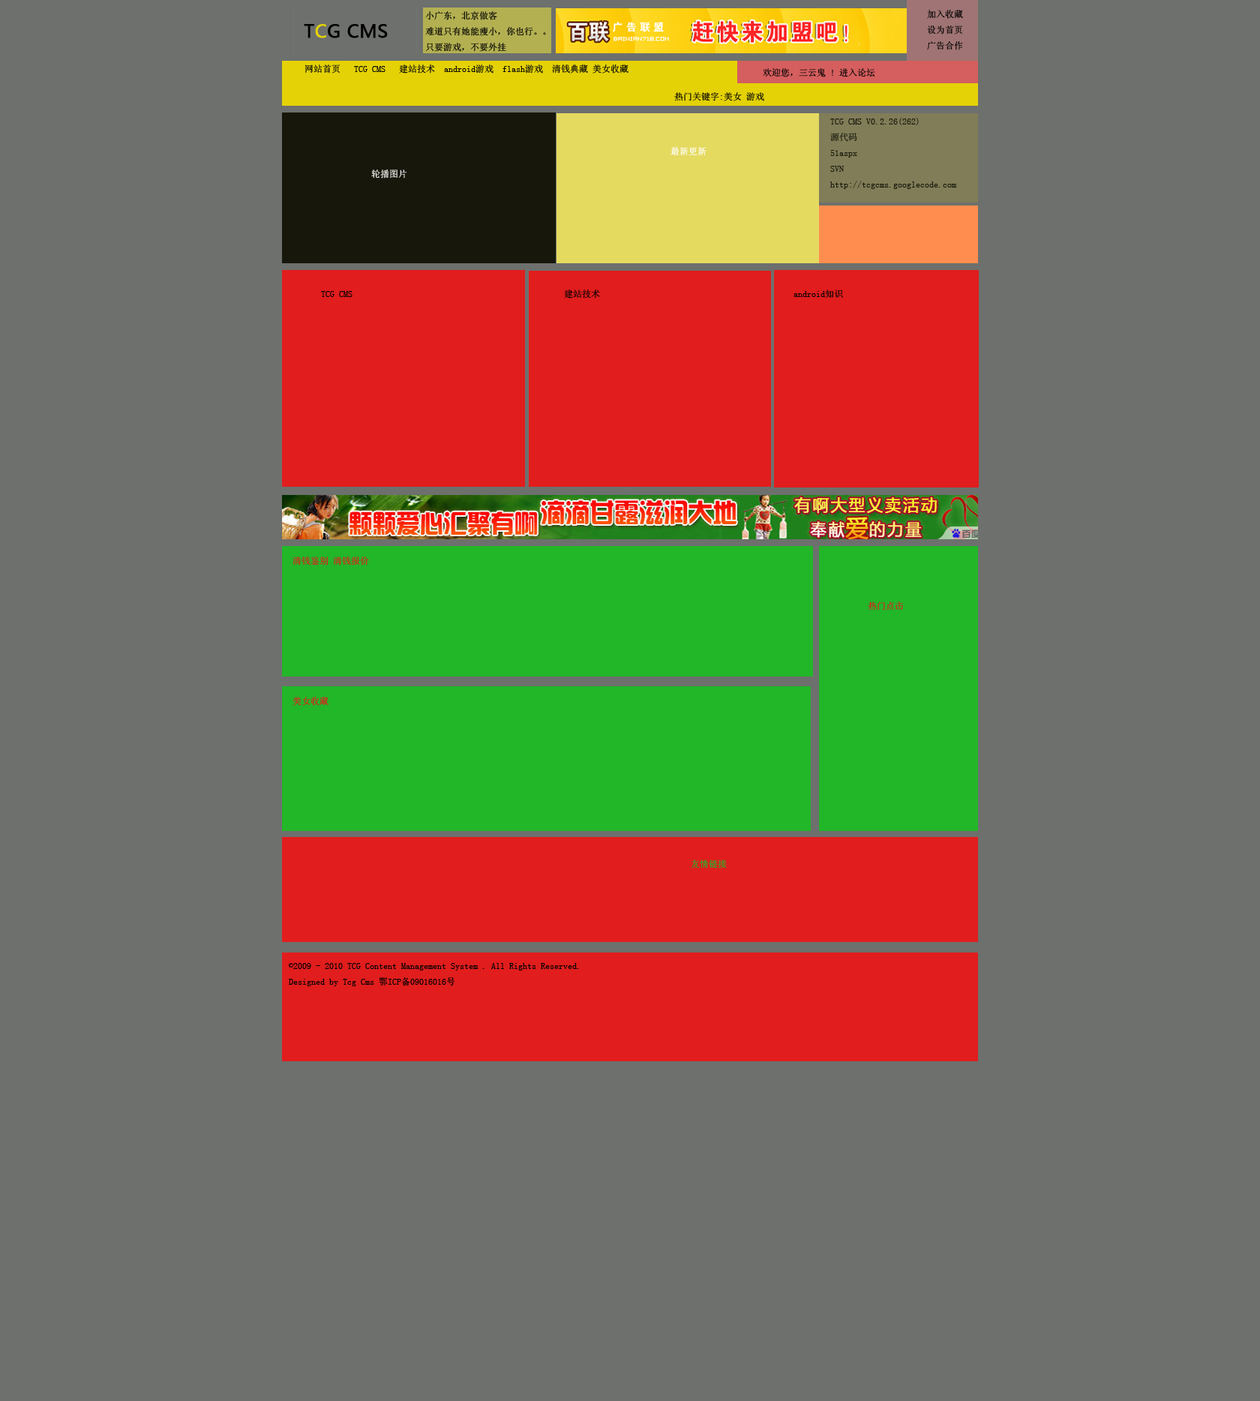
<style>
.page{position:relative;width:1260px;height:1401px;background:#6d706d}
.page>*{position:absolute;margin:0}
.t1{font:9px "SimSun";color:#000000}
.t2{font:18px "MicrosoftYaHei";color:#010000;font-weight:bold}
.t3{font:18px "MicrosoftYaHei";color:#e4d206;font-weight:bold}
.t4{font:9px "SimSun"}
.t5{font:9px "SimSun";color:#18170b}
.t6{font:9px "SimSun";color:#ffffff}
.t7{font:9px "SimSun";color:#e11d1d}
</style>
<div class="page">
<p class="t1" style="left:425px;top:11px;width:121px;height:41px">小广东，北京做客<br>难道只有她能瘦小，你也行。。<br>只要游戏，不要外挂</p>
<p class="t1" style="left:927px;top:10px;width:36px;height:40px">加入收藏<br>设为首页<br>广告合作</p>
<p class="t2" style="left:304px;top:24px;width:84px;height:14px">T<span class="t3">C</span>G CMS</p>
<p class="t1" style="left:305px;top:64px;width:323px;height:10px">网站首页   TCG CMS   建站技术  android游戏  flash游戏  清钱典藏 美女收藏</p>
<p class="t4" style="left:763px;top:68px;width:112px;height:9px">欢迎您，三云鬼 ! 进入论坛</p>
<p class="t1" style="left:674px;top:92px;width:90px;height:9px">热门关键字:美女 游戏</p>
<p class="t5" style="left:830px;top:118px;width:127px;height:71px">TCG CMS V0.2.26(262)<br>源代码<br>51aspx <br>SVN<br>http://tcgcms.googlecode.com</p>
<p class="t6" style="left:670px;top:147px;width:36px;height:9px">最新更新</p>
<p class="t4" style="left:371px;top:170px;width:35px;height:8px">轮播图片</p>
<p class="t1" style="left:321px;top:290px;width:522px;height:8px">TCG CMS                                               建站技术                                           android知识</p>
<p class="t7" style="left:292px;top:556px;width:77px;height:10px">清钱鉴别 清钱报价</p>
<p class="t7" style="left:868px;top:602px;width:36px;height:8px">热门点击</p>
<p class="t4" style="left:292px;top:697px;width:36px;height:9px">美女收藏</p>
<p class="t4" style="left:691px;top:860px;width:36px;height:8px">友情链接</p>
<p class="t1" style="left:288px;top:963px;width:291px;height:23px">©2009 - 2010 TCG Content Management System . All Rights Reserved.<br>Designed by Tcg Cms 鄂ICP备09016016号</p>
</div>
